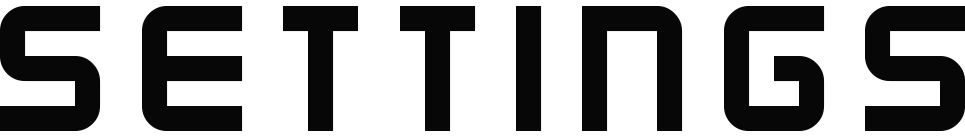
<style>
.page{position:relative;width:965px;height:137px;background:#ffffff}
.page>*{position:absolute;margin:0}
.t1{font:200px "KenVector-Future-Thin";color:#080707}
</style>
<div class="page">
<p class="t1" style="left:0px;top:6px;width:965px;height:125px">SETTINGS</p>
</div>
